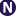
<style>
.page{position:relative;width:16px;height:16px;background:#251755}
.page>*{position:absolute;margin:0}
.t1{font:13.8px "Verdana";letter-spacing:0.05em;color:#ffffff;font-weight:bold}
</style>
<div class="page">
<p class="t1" style="left:3px;top:2px;width:9px;height:11px">N</p>
</div>
